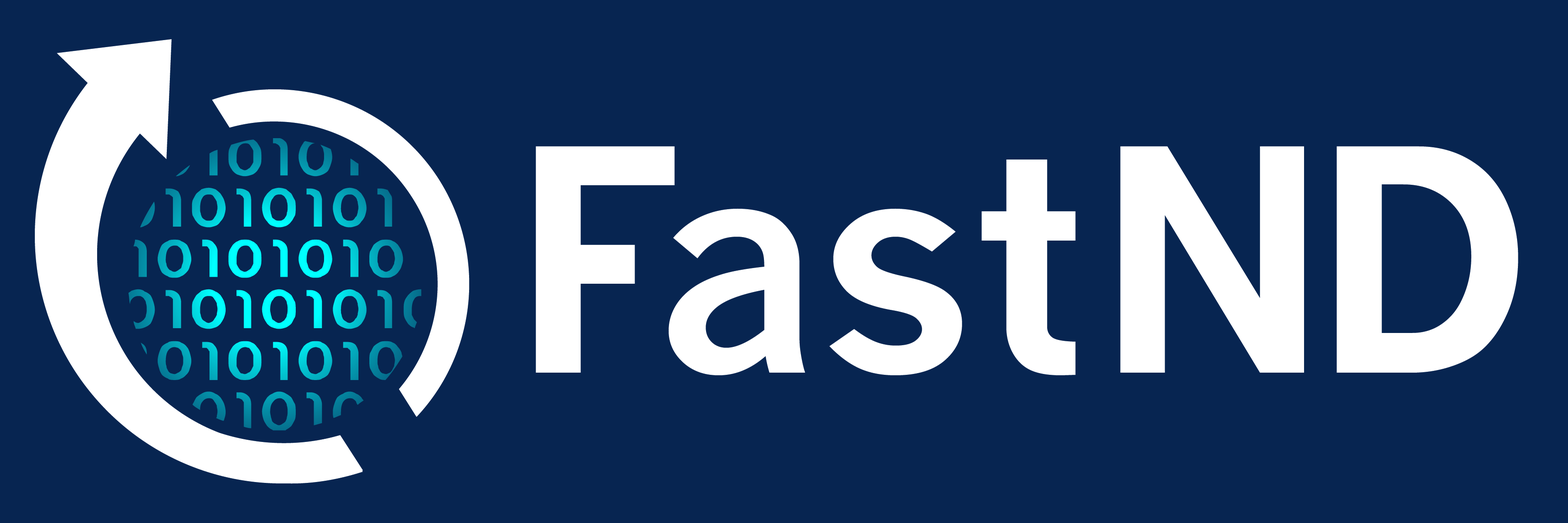
<style>
.page{position:relative;width:1568px;height:523px;background:#072551}
.page>*{position:absolute;margin:0}
.t1{font:302.2px "NewsGothic-Bold";color:#ffffff}
</style>
<div class="page">
<p class="t1" style="left:536px;top:146px;width:982px;height:229px">FastND</p>
</div>
